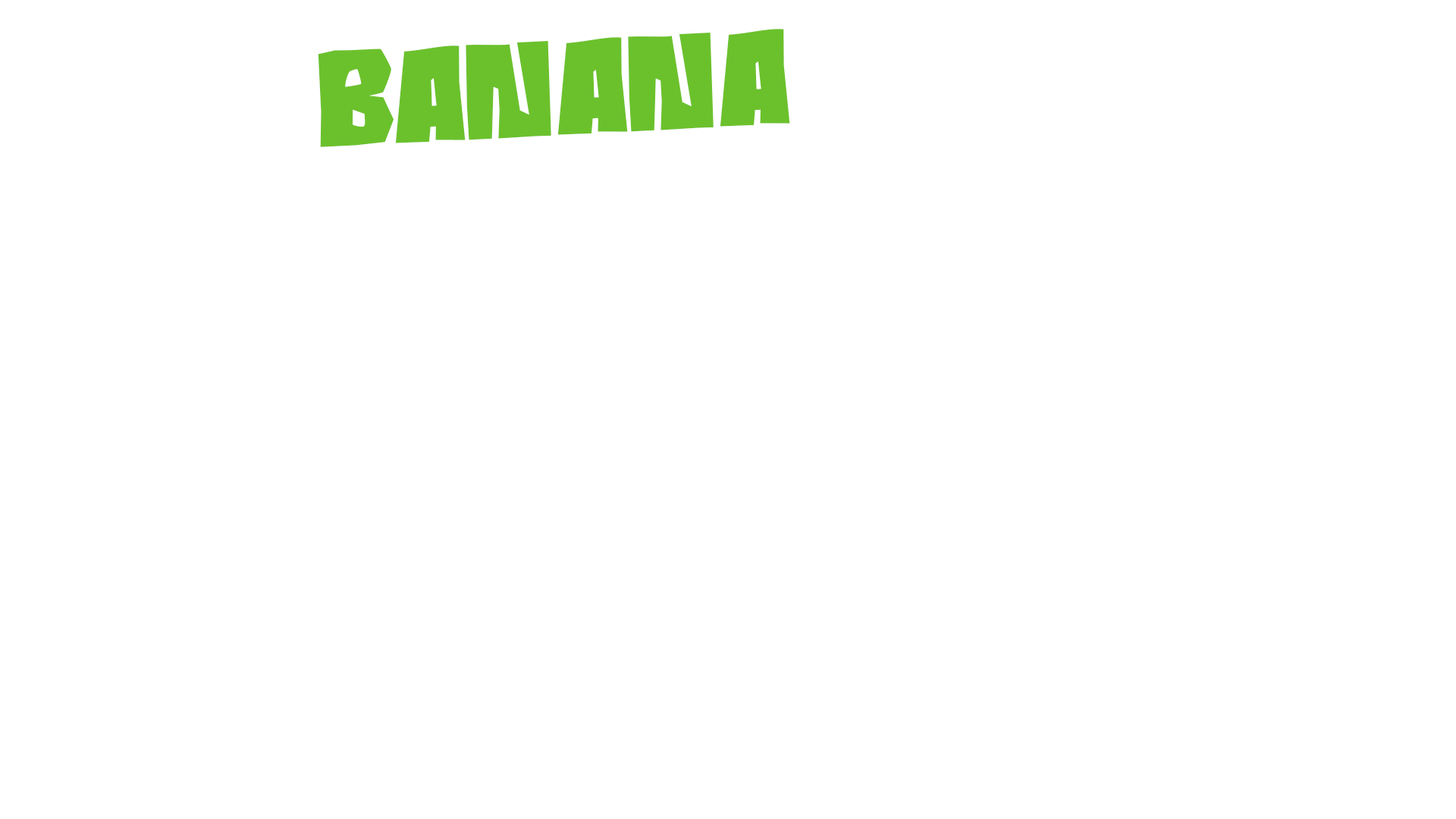
<style>
.page{position:relative;width:1456px;height:819px;background:#ffffff}
.page>*{position:absolute;margin:0}
.t1{font:155.8px "RoaringJungle";color:#6bc12c}
.t2{font:152.2px "RoaringJungle";color:#6bc12c}
</style>
<div class="page">
<p class="t1" style="left:304px;top:30px;width:483px;height:120px;rotate:-3deg">BANANA</p>
<p class="t2" style="left:318px;top:29px;width:472px;height:118px;rotate:-3deg">BANANA</p>
</div>
